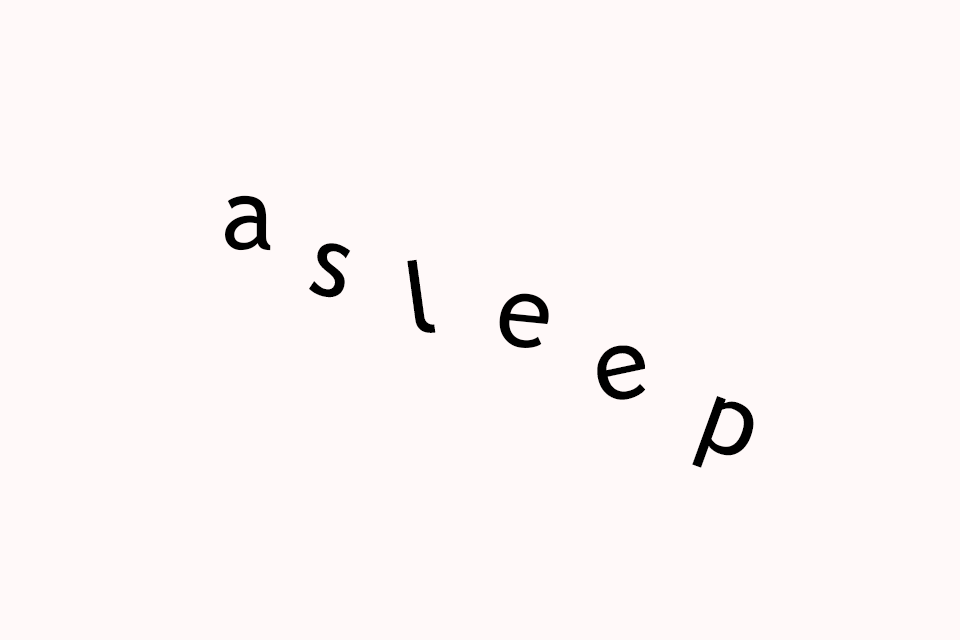
<style>
.page{position:relative;width:960px;height:640px;background:#fff9f9}
.page>*{position:absolute;margin:0}
.t1{font:100px "TrebuchetMS";color:#000000}
</style>
<div class="page">
<p class="t1" style="left:225px;top:195px;width:46px;height:56px">a</p>
<p class="t1" style="left:309px;top:243px;width:42px;height:55px;rotate:13deg">s</p>
<p class="t1" style="left:407px;top:259px;width:29px;height:74px;rotate:-8deg">l</p>
<p class="t1" style="left:499px;top:293px;width:50px;height:55px;rotate:6deg">e</p>
<p class="t1" style="left:597px;top:345px;width:49px;height:55px;rotate:-12deg">e</p>
<p class="t1" style="left:692px;top:396px;width:62px;height:72px;rotate:20deg">p</p>
</div>
